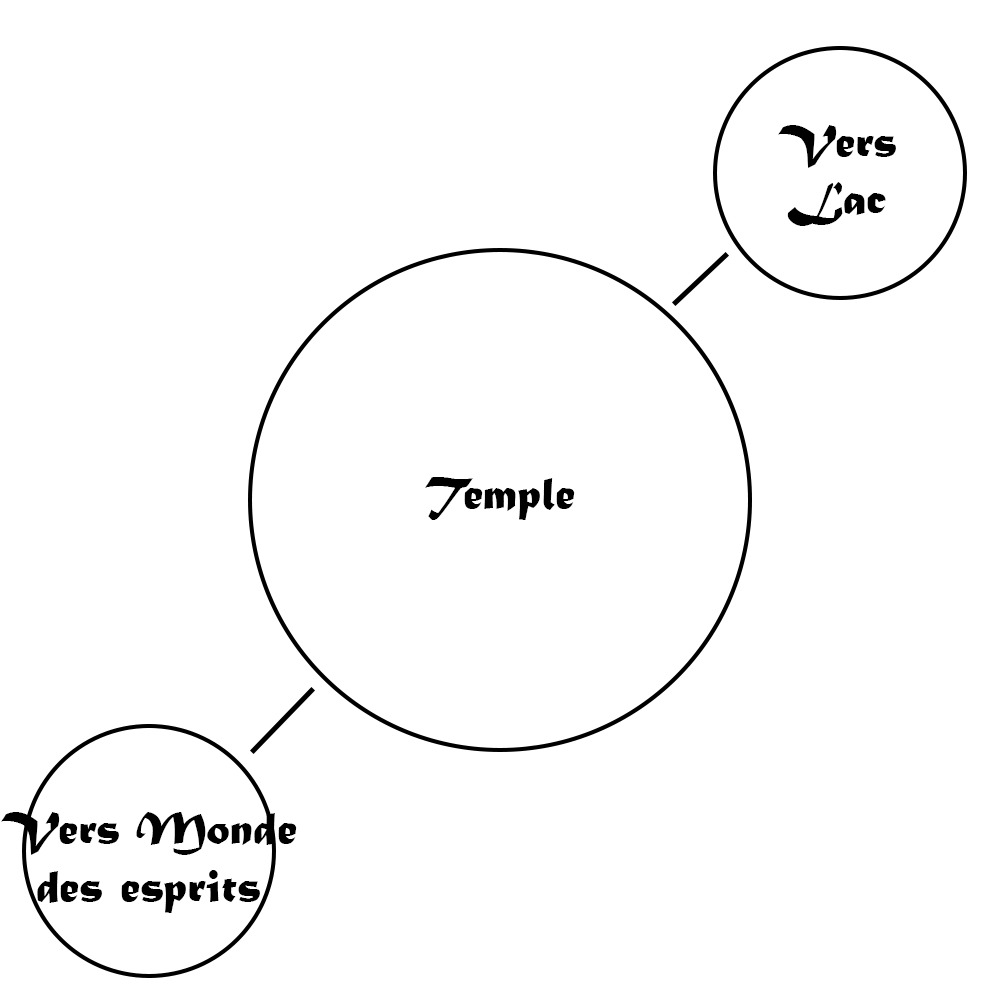
<style>
.page{position:relative;width:1000px;height:1000px;background:#ffffff}
.page>*{position:absolute;margin:0}
.t1{font:48px "MaturaMTScriptCapitals";color:#000000}
</style>
<div class="page">
<p class="t1" style="left:778px;top:125px;width:118px;height:101px;text-align:center">Vers<br>Lac</p>
<p class="t1" style="left:425px;top:477px;width:150px;height:43px">Temple</p>
<p class="t1" style="left:1px;top:812px;width:296px;height:101px;text-align:center">Vers Monde<br>des esprits</p>
</div>
